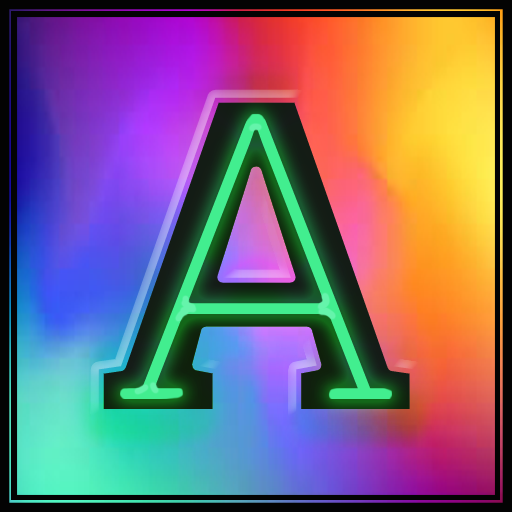
<style>
.page{position:relative;width:512px;height:512px}
.page>*{position:absolute;margin:0}
.t1{font:444.4px "RobotoSlab-Black"}
</style>
<div class="page">
<p class="t1" style="left:98px;top:97px;width:317px;height:317px">A</p>
</div>
